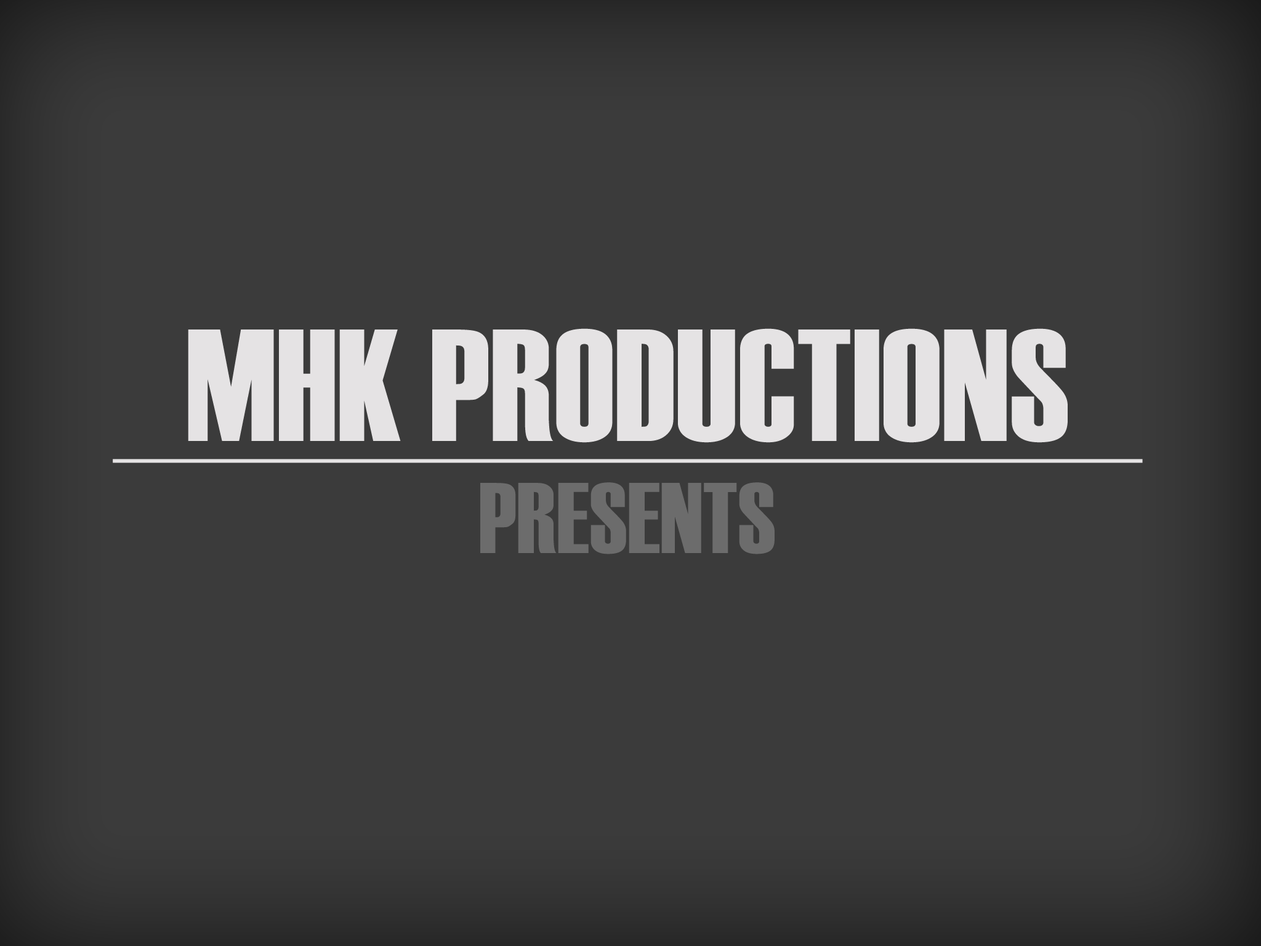
<style>
.page{position:relative;width:1261px;height:946px;background:#3b3b3b}
.page>*{position:absolute;margin:0}
.t1{font:159.1px "Haettenschweiler";color:#e5e3e4}
.t2{font:100px "Haettenschweiler";color:#6c6c6c}
</style>
<div class="page">
<p class="t1" style="left:188px;top:328px;width:880px;height:115px">MHK PRODUCTIONS</p>
<p class="t2" style="left:480px;top:482px;width:295px;height:72px">PRESENTS</p>
</div>
